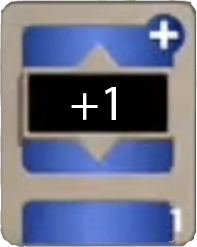
<style>
.page{position:relative;width:197px;height:247px}
.page>*{position:absolute;margin:0}
.t1{font:50px "MyriadPro-Regular";color:#ffffff}
</style>
<div class="page">
<p class="t1" style="left:71px;top:87px;width:45px;height:33px">+1</p>
</div>
